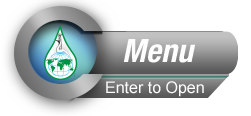
<style>
.page{position:relative;width:251px;height:116px;background:#ffffff}
.page>*{position:absolute;margin:0}
.t1{font:32.1px "HelveticaNeueLTPro-BdCnO";color:#fdfdfd}
.t2{font:16px "ArialMT";color:#fdfdfd}
</style>
<div class="page">
<p class="t1" style="left:123px;top:39px;width:73px;height:24px">Menu</p>
<p class="t2" style="left:106px;top:81px;width:98px;height:16px">Enter to Open</p>
</div>
